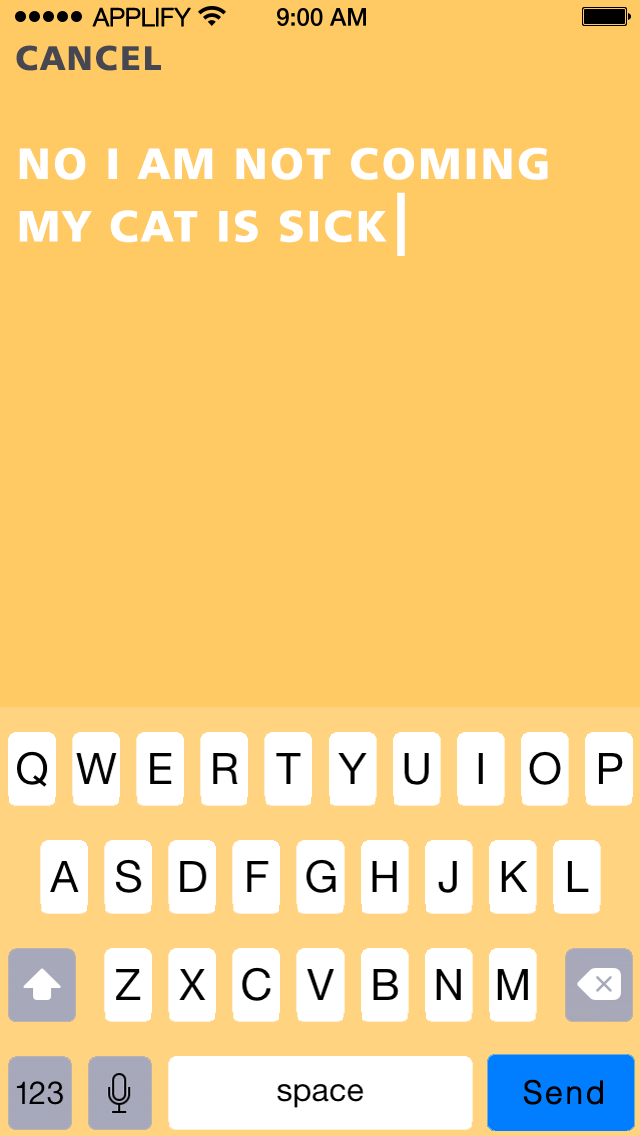
<style>
.page{position:relative;width:640px;height:1136px;background:#ffc964}
.page>*{position:absolute;margin:0}
.t1{font:25px "HelveticaNeueLTCom-Lt";letter-spacing:-0.02em;color:#000000;font-weight:bold}
.t2{font:58.3px "Humanist777BT-BlackB";letter-spacing:0.06em;color:#464751}
.t3{font:75px/62.5px "Humanist777BT-BlackB";letter-spacing:0.06em;color:#ffffff}
.t4{font:108.3px "Humanist777BT-BlackB";letter-spacing:0.06em;color:#ffffff}
.t5{font:54.2px "HelveticaLTStd-Light";letter-spacing:0.06em;color:#000000;font-weight:bold}
</style>
<div class="page">
<p class="t1" style="left:92px;top:7px;width:99px;height:20px">APPLIFY</p>
<p class="t2" style="left:16px;top:45px;width:145px;height:26px">CANCEL</p>
<p class="t3" style="left:19px;top:147px;width:529px;height:96px;text-align:right">NO I AM NOT COMING <br>MY CAT IS SICK</p>
<p class="t4" style="left:397px;top:192px;width:8px;height:64px">|</p>
<p class="t5" style="left:523px;top:1079px;width:80px;height:26px">Send</p>
</div>
